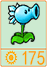
<style>
.page{position:relative;width:47px;height:67px;background:#ccead0}
.page>*{position:absolute;margin:0}
.t1{font:20.2px "SimHei";letter-spacing:-0.1em;color:#ff9c00;scale:0.84 1}
.t2{font:20.2px "SimHei";letter-spacing:0.025em;color:#ff9c00;scale:0.84 1}
.t3{font:20.2px "SimHei";letter-spacing:0.2em;color:#ff9c00;scale:0.84 1}
</style>
<div class="page">
<p class="t1" style="left:22px;top:50px;width:23px;height:15px">1<span class="t2">7</span><span class="t3">5</span></p>
</div>
